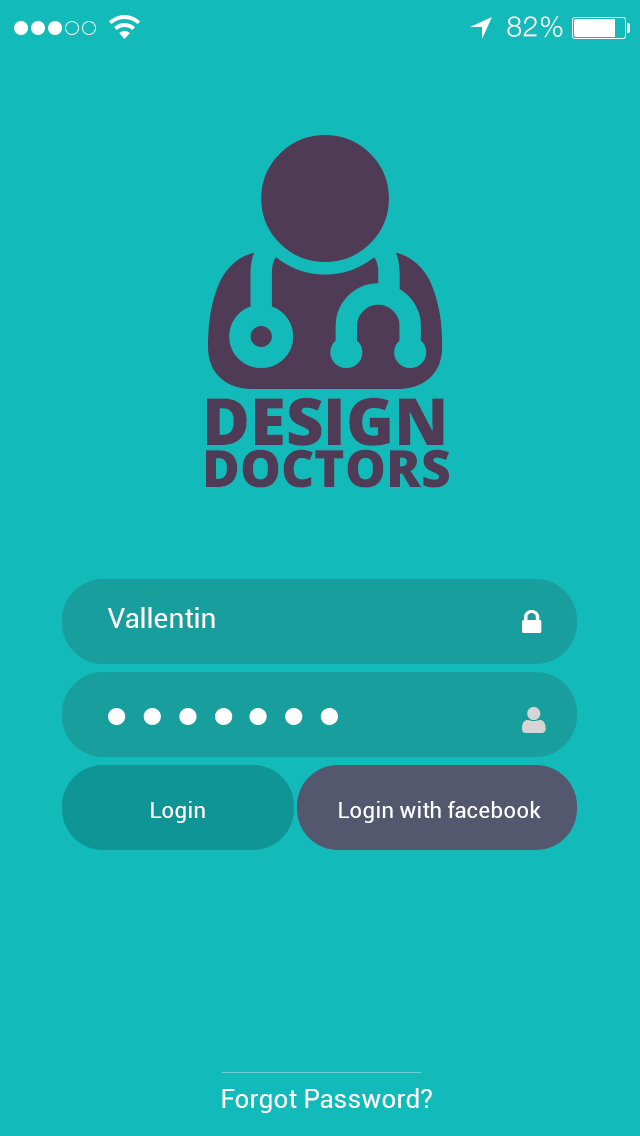
<style>
.page{position:relative;width:640px;height:1136px;background:#13baba}
.page>*{position:absolute;margin:0}
.t1{font:28px "HelveticaNeue-Light";letter-spacing:0.025em;color:#ffffff}
.t2{font:51.6px/42.6px "OpenSans-Extrabold";color:#503b56;text-transform:uppercase}
.t3{font:65.2px/50.7px "OpenSans-Extrabold";color:#503b56;text-transform:uppercase}
.t4{font:28px "Roboto-Regular";color:#ffffff}
.t5{font:22px "Roboto-Regular";color:#ffffff}
.t6{font:26px "Roboto-Regular";color:#ffffff}
</style>
<div class="page">
<p class="t1" style="left:507px;top:16px;width:56px;height:22px">82%</p>
<p class="t2" style="left:206px;top:397px;width:243px;height:91px"><span class="t3">design <br></span>doctors</p>
<p class="t4" style="left:107px;top:607px;width:108px;height:21px">Vallentin</p>
<p class="t5" style="left:151px;top:801px;width:54px;height:22px">Login</p>
<p class="t5" style="left:339px;top:801px;width:202px;height:22px">Login with facebook</p>
<p class="t6" style="left:222px;top:1088px;width:210px;height:25px">Forgot Password?</p>
</div>
